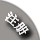
<style>
.page{position:relative;width:40px;height:40px;background:#989593}
.page>*{position:absolute;margin:0}
.t1{font:12px "SimSun";color:#fcf9f9}
</style>
<div class="page">
<p class="t1" style="left:5px;top:11px;width:24px;height:24px;rotate:46deg">注册</p>
<p class="t1" style="left:5px;top:11px;width:24px;height:24px;rotate:46deg">注册</p>
<p class="t1" style="left:5px;top:11px;width:24px;height:24px;rotate:46deg">注册</p>
<p class="t1" style="left:5px;top:11px;width:24px;height:24px;rotate:46deg">注册</p>
<p class="t1" style="left:5px;top:11px;width:24px;height:24px;rotate:46deg">注册</p>
</div>
